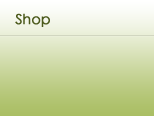
<style>
.page{position:relative;width:154px;height:116px}
.page>*{position:absolute;margin:0}
.t1{font:14px "CenturyGothic";color:#4b591b;font-weight:bold}
</style>
<div class="page">
<p class="t1" style="left:15px;top:13px;width:35px;height:14px">Shop</p>
</div>
